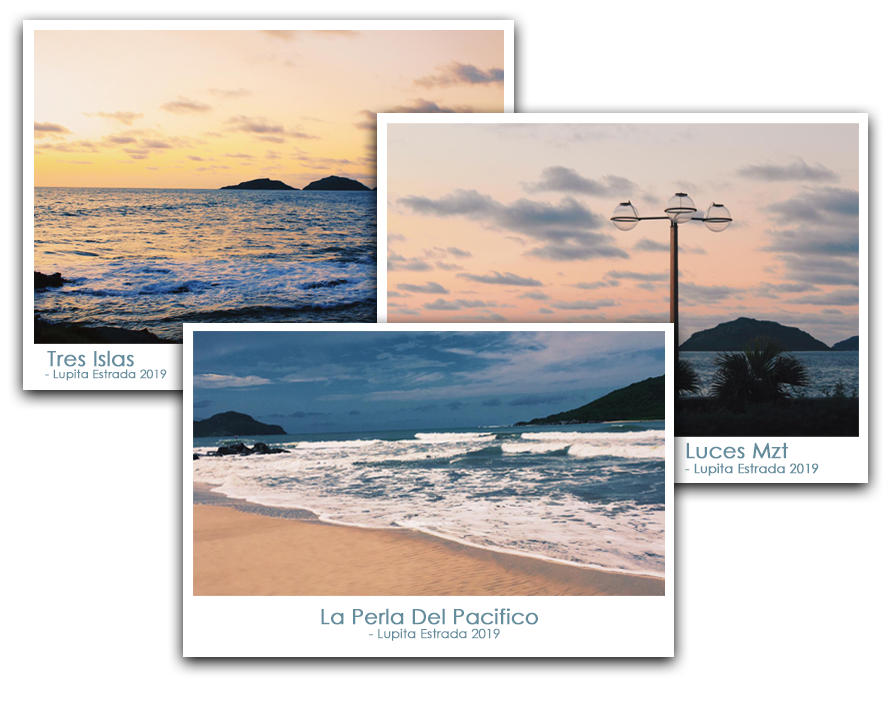
<style>
.page{position:relative;width:896px;height:714px;background:#ffffff}
.page>*{position:absolute;margin:0}
.t1{font:20.9px "CenturyGothic";color:#638c9d;font-weight:bold}
.t2{font:11.5px "CenturyGothic";color:#638c9d;font-weight:bold}
.t3{font:12.7px "CenturyGothic";color:#638c9d;font-weight:bold}
.t4{font:12.5px "CenturyGothic";color:#638c9d;font-weight:bold}
</style>
<div class="page">
<p class="t1" style="left:47px;top:350px;width:87px;height:17px">Tres Islas</p>
<p class="t2" style="left:45px;top:369px;width:122px;height:12px">- Lupita Estrada 2019</p>
<p class="t1" style="left:686px;top:442px;width:102px;height:17px">Luces Mzt</p>
<p class="t3" style="left:685px;top:463px;width:134px;height:13px">- Lupita Estrada 2019</p>
<p class="t1" style="left:321px;top:608px;width:217px;height:17px">La Perla Del Pacifico</p>
<p class="t4" style="left:369px;top:628px;width:131px;height:13px">- Lupita Estrada 2019</p>
</div>
